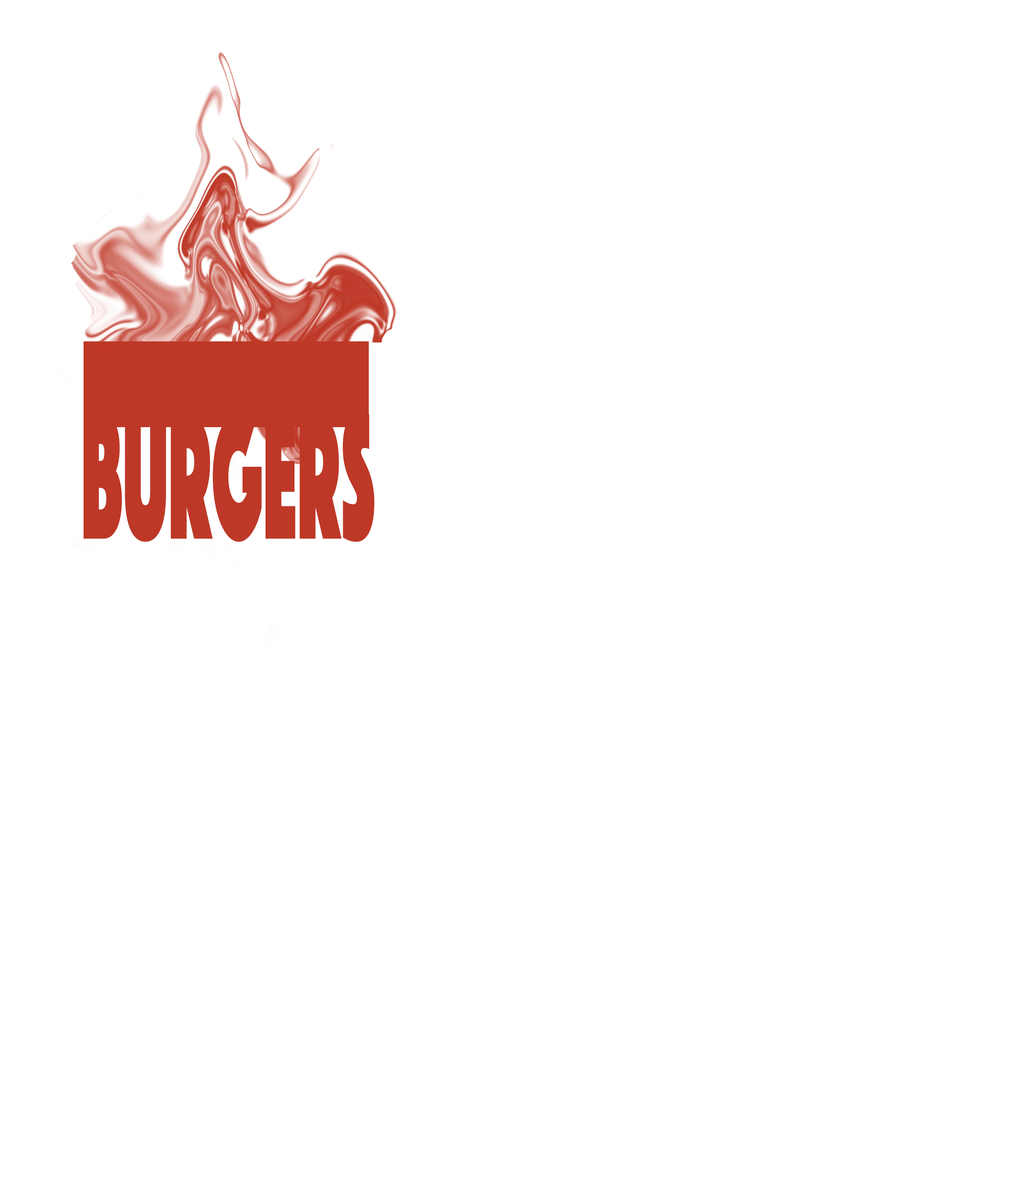
<style>
.page{position:relative;width:1012px;height:1179px;background:#ffffff}
.page>*{position:absolute;margin:0}
.t1{font:185.7px "Phosphate-Solid";color:#be3827;scale:0.4 1}
</style>
<div class="page">
<p class="t1" style="left:84px;top:411px;width:290px;height:131px">BURGERS</p>
</div>
